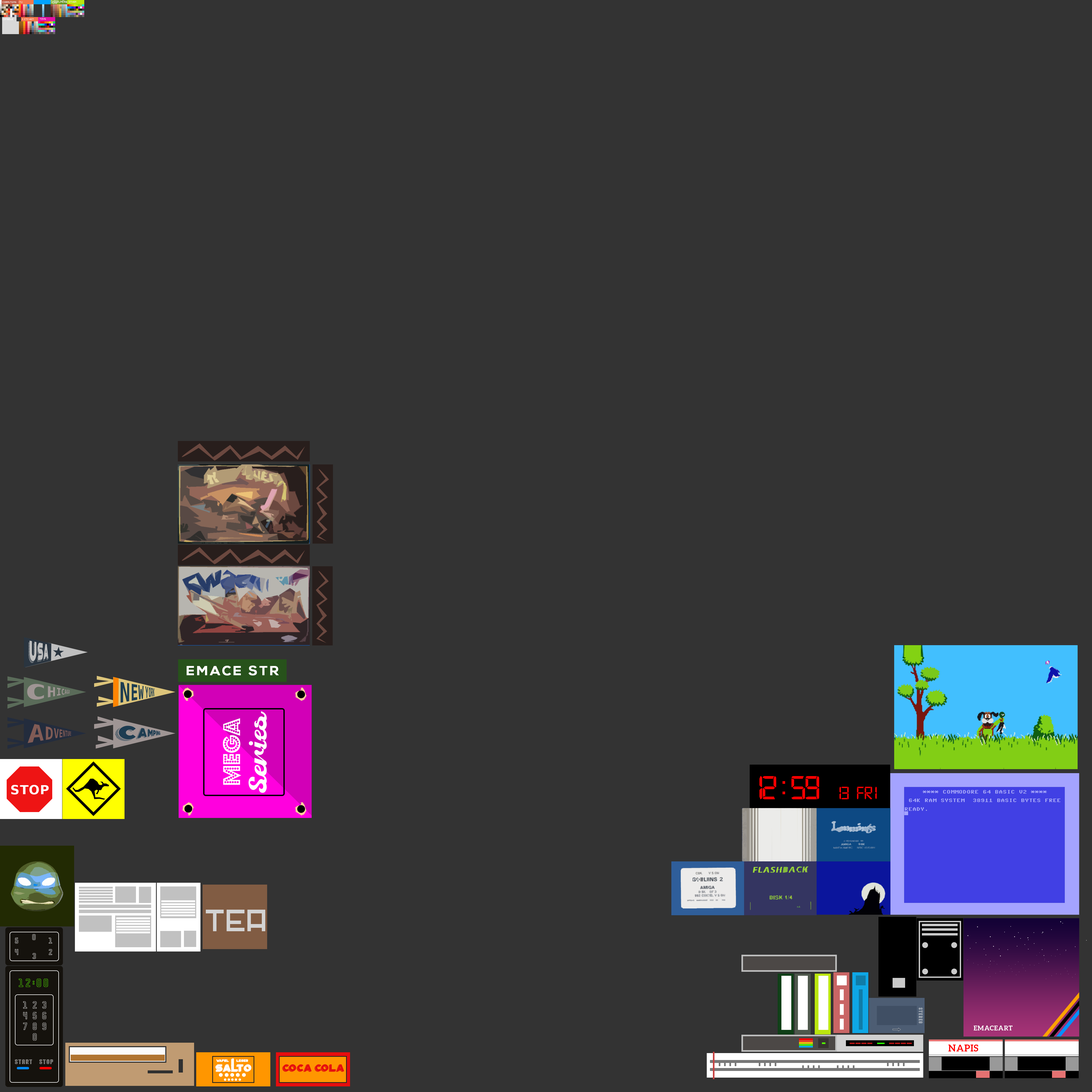
<style>
.page{position:relative;width:1092px;height:1092px;background:#333333}
.page>*{position:absolute;margin:0}
.t1{font:2.1px "Pixel-Art";letter-spacing:-0.07em;color:#f2f2f2;text-transform:uppercase}
.t2{font:2.1px "Pixel-Art";color:#f2f2f2;text-transform:uppercase}
.t3{font:2.1px/1.9px "Pixel-Art";color:#f2f2f2;text-transform:uppercase}
.t4{font:2.1px "Pixel-Art";letter-spacing:-0.07em;color:#ffffff;text-transform:uppercase}
.t5{font:13px "NexaBold";letter-spacing:0.15em;color:#ffffff;text-transform:uppercase;font-weight:bold}
.t6{font:66.6px/26.7px "Retrock";color:#ffffff}
.t7{font:34.6px/33.5px "BudmoJiggler-Regular";color:#ffffff;text-transform:uppercase}
.t8{font:26.7px/33.5px "BudmoJiggler-Regular";color:#ffffff;text-transform:uppercase}
.t9{font:12.4px "DejaVuSans-Bold";letter-spacing:0.04em;color:#ffffff;text-transform:uppercase}
.t10{font:19.2px "Digital-7Mono";letter-spacing:-0.05em;color:#ff0000;text-transform:uppercase}
.t11{font:35.3px "Digital-7Mono";letter-spacing:-0.05em;color:#ff0000;text-transform:uppercase}
.t12{font:28.7px "Pixel-Art";letter-spacing:-0.07em;color:#d3d3d3;text-transform:uppercase}
.t13{font:9.9px "DISPLAYEDoutline";letter-spacing:-0.1em;color:#ffffff;text-transform:uppercase}
.t14{font:13.8px "DISPLAYEDoutline";color:#60ff00;text-transform:uppercase}
.t15{font:12px/10.7px "DISPLAYEDoutline";letter-spacing:-0.1em;color:#ffffff;text-transform:uppercase}
.t16{font:5.8px "DISPLAYEDoutline";text-transform:uppercase}
.t17{font:6.6px "Aleo-Bold";letter-spacing:0.04em;color:#ffffff;text-transform:uppercase}
.t18{font:9.3px "Aleo-Bold";letter-spacing:0.04em;color:#ff0000;text-transform:uppercase}
.t19{font:7.5px "DISPLAYEDoutline";text-transform:uppercase}
.t20{font:3.2px "Portico-Vintage";color:#ffffff;text-transform:uppercase}
.t21{font:9.7px "Portico-Vintage";color:#ffffff;text-transform:uppercase}
.t22{font:9.7px "Portico-Vintage";color:#ffffff}
.t23{font:9.7px "Portico-Vintage";color:#e60e0e}
</style>
<div class="page">
<p class="t1" style="left:2px;top:1px;width:14px;height:2px">computers</p>
<p class="t2" style="left:18px;top:1px;width:4px;height:2px">rtv</p>
<p class="t3" style="left:51px;top:0px;width:8px;height:4px">FURNI<br>TURE</p>
<p class="t2" style="left:52px;top:1px;width:15px;height:2px">computers</p>
<p class="t2" style="left:60px;top:0px;width:7px;height:2px">WALL</p>
<p class="t1" style="left:69px;top:1px;width:7px;height:2px">other</p>
<p class="t4" style="left:2px;top:18px;width:11px;height:2px">CONSOLE</p>
<p class="t2" style="left:22px;top:18px;width:12px;height:2px">kitchen</p>
<p class="t1" style="left:40px;top:18px;width:6px;height:2px">toys</p>
<p class="t5" style="left:187px;top:665px;width:92px;height:11px">emace STR</p>
<p class="t6" style="left:218px;top:711px;width:49px;height:82px;text-align:center;rotate:-90deg"><span class="t7">MAX<br></span>Series</p>
<p class="t6" style="left:223px;top:711px;width:44px;height:82px;text-align:center;rotate:-90deg"><span class="t8">mega<br></span>Series</p>
<p class="t9" style="left:11px;top:785px;width:38px;height:9px">stop</p>
<p class="t10" style="left:759px;top:776px;width:118px;height:23px"><span class="t11">12:59 </span>13 fri</p>
<p class="t12" style="left:206px;top:910px;width:59px;height:21px">tea</p>
<p class="t13" style="left:15px;top:938px;width:3px;height:5px">5</p>
<p class="t13" style="left:32px;top:934px;width:4px;height:6px">0</p>
<p class="t13" style="left:49px;top:938px;width:3px;height:5px">1</p>
<p class="t13" style="left:15px;top:949px;width:3px;height:6px">4</p>
<p class="t13" style="left:33px;top:953px;width:3px;height:6px">3</p>
<p class="t13" style="left:49px;top:949px;width:3px;height:6px">2</p>
<p class="t14" style="left:19px;top:979px;width:29px;height:8px">12:00</p>
<p class="t15" style="left:23px;top:1001px;width:23px;height:40px">1 2 3<br>4 5 6<br>7 8 9<br>  0</p>
<p class="t16" style="left:919px;top:1008px;width:4px;height:15px;rotate:90deg">stereo</p>
<p class="t17" style="left:974px;top:1025px;width:39px;height:5px">emaceart</p>
<p class="t18" style="left:948px;top:1045px;width:30px;height:6px">napis</p>
<p class="t19" style="left:15px;top:1059px;width:17px;height:5px">start</p>
<p class="t19" style="left:39px;top:1059px;width:14px;height:5px">stop</p>
<p class="t20" style="left:216px;top:1059px;width:13px;height:3px">wafel</p>
<p class="t21" style="left:231px;top:1058px;width:3px;height:8px">i</p>
<p class="t20" style="left:236px;top:1059px;width:12px;height:3px">leser</p>
<p class="t22" style="left:215px;top:1064px;width:36px;height:8px">salto</p>
<p class="t23" style="left:282px;top:1064px;width:62px;height:8px">COCA COLA</p>
</div>
